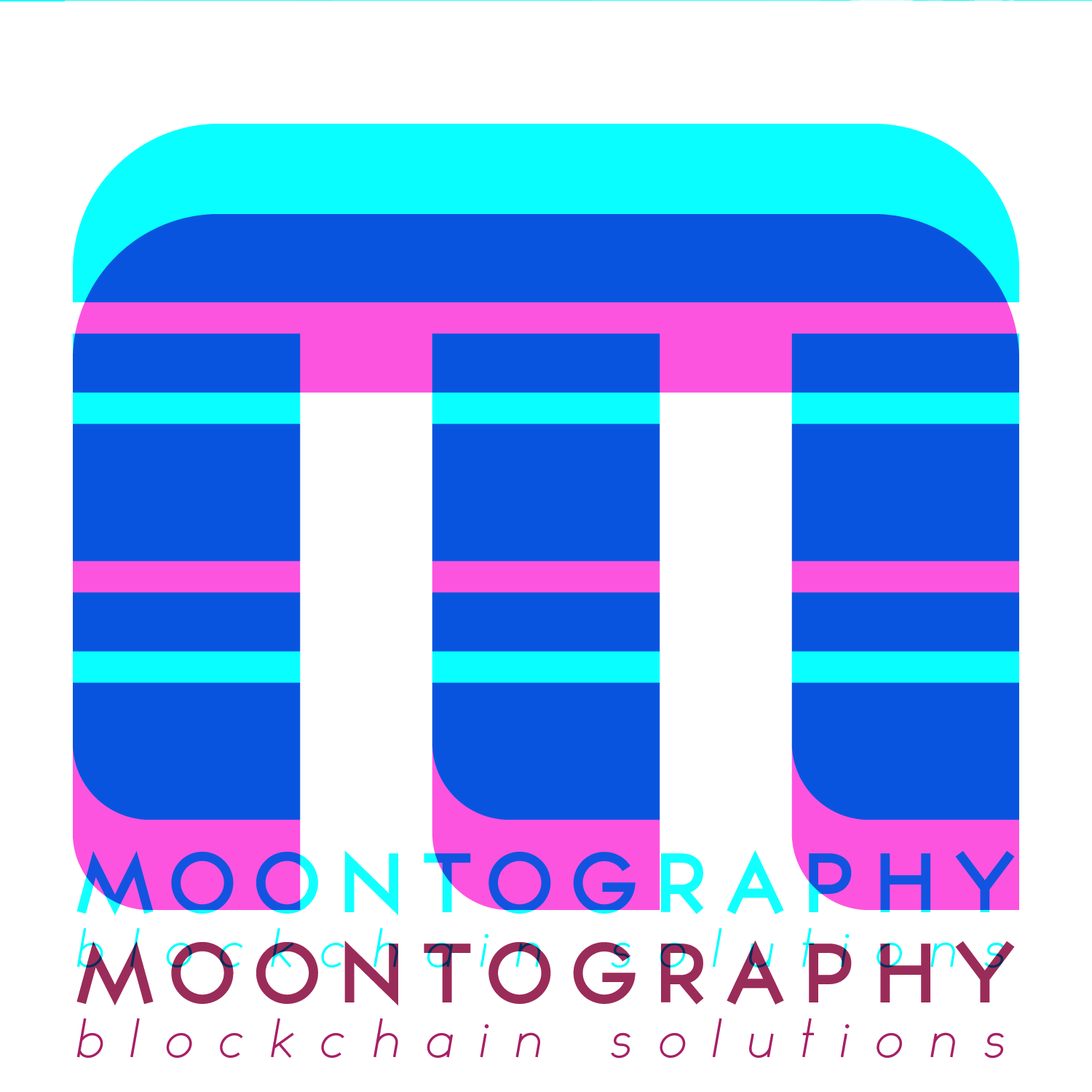
<style>
.page{position:relative;width:1092px;height:1092px;background:#ffffff}
.page>*{position:absolute;margin:0}
.t1{font:75.8px "TYPOGRAPHPRO-SemiBold";letter-spacing:0.2em}
.t2{font:48.5px "TYPOGRAPHPRO-LightItalic";letter-spacing:0.5em}
</style>
<div class="page">
<p class="t1" style="left:76px;top:850px;width:939px;height:65px">MOONTOGRAPHY</p>
<p class="t2" style="left:76px;top:927px;width:928px;height:40px">blockchain solutions</p>
</div>
